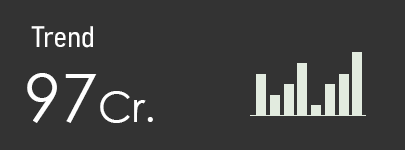
<style>
.page{position:relative;width:405px;height:150px;background:#333333}
.page>*{position:absolute;margin:0}
.t1{font:29.2px "Bahnschrift-SemiLightSemiCondensed";color:#ffffff}
.t2{font:41.7px "CenturyGothic";color:#ffffff}
.t3{font:66.7px "CenturyGothic";color:#ffffff}
</style>
<div class="page">
<p class="t1" style="left:31px;top:26px;width:62px;height:22px">Trend</p>
<p class="t2" style="left:27px;top:73px;width:126px;height:50px"><span class="t3">97</span>Cr.</p>
</div>
